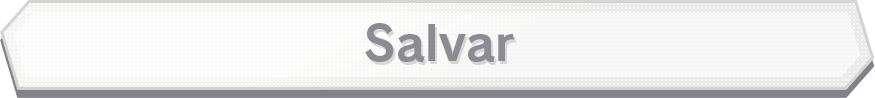
<style>
.page{position:relative;width:875px;height:98px;background:#fbfafb}
.page>*{position:absolute;margin:0}
.t1{font:48px "RodinPro-B";color:#8c8b93}
</style>
<div class="page">
<p class="t1" style="left:365px;top:23px;width:149px;height:39px">Salvar</p>
</div>
